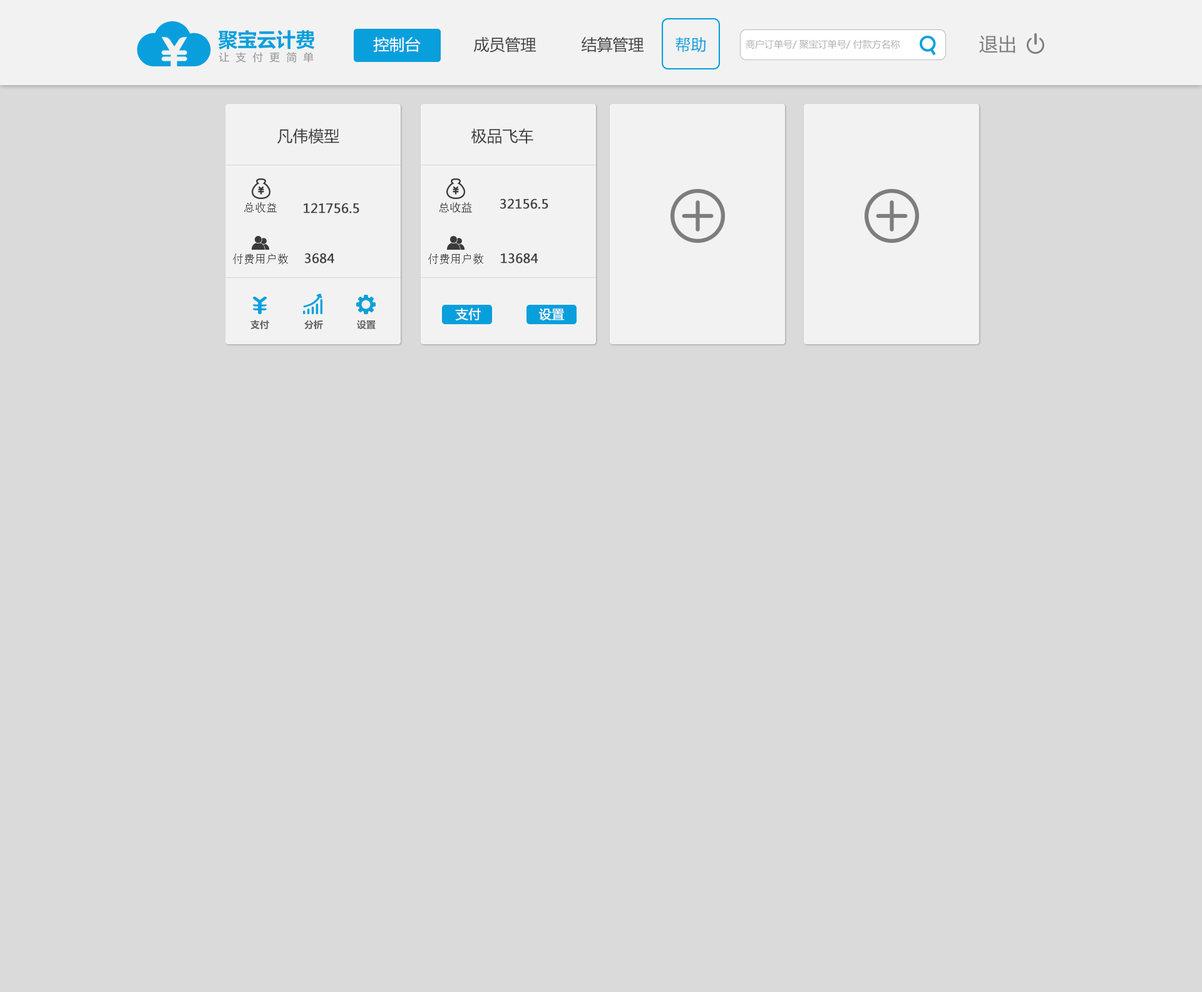
<style>
.page{position:relative;width:1202px;height:992px;background:#dadada}
.page>*{position:absolute;margin:0}
.t1{font:15.6px "MicrosoftYaHei";color:#ffffff}
.t2{font:15.6px "MicrosoftYaHei";color:#3f3f3f}
.t3{font:15.6px "MicrosoftYaHei";color:#099fdd}
.t4{font:9.4px "MicrosoftYaHei";color:#aeaeae}
.t5{font:18.8px "MicrosoftYaHei";color:#7d7d7d}
.t6{font:15.6px "MicrosoftYaHei";color:#3a3a3a}
.t7{font:11.3px "SimSun";color:#3f3f3f}
.t8{font:12.5px "MicrosoftYaHei";color:#3f3f3f;font-weight:bold}
.t9{font:11.3px "SimHei";color:#3f3f3f}
.t10{font:12.5px "MicrosoftYaHei";color:#ffffff;font-weight:bold}
.t11{font:9.4px "MicrosoftYaHei-Bold";color:#666666}
</style>
<div class="page">
<p class="t1" style="left:373px;top:37px;width:48px;height:16px">控制台</p>
<p class="t2" style="left:473px;top:37px;width:63px;height:16px">成员管理</p>
<p class="t2" style="left:581px;top:37px;width:62px;height:16px">结算管理</p>
<p class="t3" style="left:675px;top:37px;width:30px;height:15px">帮助</p>
<p class="t4" style="left:746px;top:39px;width:154px;height:10px">商户订单号/ 聚宝订单号/ 付款方名称</p>
<p class="t5" style="left:979px;top:35px;width:36px;height:18px">退出</p>
<p class="t6" style="left:277px;top:128px;width:62px;height:16px">凡伟模型</p>
<p class="t6" style="left:471px;top:128px;width:62px;height:16px">极品飞车</p>
<p class="t7" style="left:244px;top:202px;width:33px;height:11px">总收益</p>
<p class="t8" style="left:304px;top:203px;width:55px;height:10px">121756.5</p>
<p class="t9" style="left:439px;top:202px;width:33px;height:11px">总收益</p>
<p class="t8" style="left:500px;top:198px;width:48px;height:11px">32156.5</p>
<p class="t7" style="left:233px;top:254px;width:55px;height:10px">付费用户数</p>
<p class="t8" style="left:305px;top:253px;width:29px;height:11px">3684</p>
<p class="t7" style="left:428px;top:254px;width:55px;height:10px">付费用户数</p>
<p class="t8" style="left:501px;top:253px;width:37px;height:11px">13684</p>
<p class="t10" style="left:455px;top:308px;width:26px;height:12px">支付</p>
<p class="t10" style="left:539px;top:309px;width:26px;height:11px">设置</p>
<p class="t11" style="left:250px;top:320px;width:19px;height:9px">支付</p>
<p class="t11" style="left:304px;top:320px;width:19px;height:9px">分析</p>
<p class="t11" style="left:357px;top:320px;width:19px;height:9px">设置</p>
</div>
